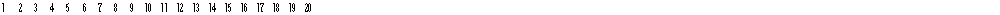
<style>
.page{position:relative;width:1000px;height:15px;background:#ffffff}
.page>*{position:absolute;margin:0}
.t1{font:11px "BirchStd";color:#000000}
</style>
<div class="page">
<p class="t1" style="left:2px;top:3px;width:2px;height:9px">1</p>
<p class="t1" style="left:19px;top:3px;width:3px;height:9px">2</p>
<p class="t1" style="left:34px;top:3px;width:3px;height:9px">3</p>
<p class="t1" style="left:50px;top:3px;width:4px;height:9px">4</p>
<p class="t1" style="left:66px;top:3px;width:3px;height:9px">5</p>
<p class="t1" style="left:83px;top:3px;width:3px;height:9px">6</p>
<p class="t1" style="left:98px;top:3px;width:4px;height:9px">7</p>
<p class="t1" style="left:114px;top:3px;width:3px;height:9px">8</p>
<p class="t1" style="left:130px;top:3px;width:3px;height:9px">9</p>
<p class="t1" style="left:145px;top:3px;width:2px;height:9px">1</p>
<p class="t1" style="left:148px;top:3px;width:3px;height:9px">0</p>
<p class="t1" style="left:161px;top:3px;width:2px;height:9px">1</p>
<p class="t1" style="left:165px;top:3px;width:2px;height:9px">1</p>
<p class="t1" style="left:177px;top:3px;width:2px;height:9px">1</p>
<p class="t1" style="left:180px;top:3px;width:3px;height:9px">2</p>
<p class="t1" style="left:193px;top:3px;width:6px;height:9px">13</p>
<p class="t1" style="left:209px;top:3px;width:7px;height:9px">14</p>
<p class="t1" style="left:225px;top:3px;width:6px;height:9px">15</p>
<p class="t1" style="left:241px;top:3px;width:6px;height:9px">16</p>
<p class="t1" style="left:257px;top:3px;width:7px;height:9px">17</p>
<p class="t1" style="left:273px;top:3px;width:6px;height:9px">18</p>
<p class="t1" style="left:289px;top:3px;width:6px;height:9px">19</p>
<p class="t1" style="left:305px;top:3px;width:6px;height:9px">20</p>
</div>
